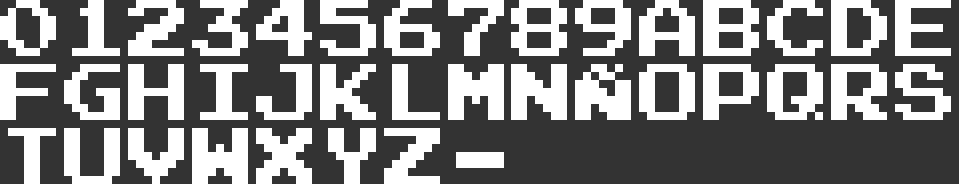
<style>
.page{position:relative;width:959px;height:184px;background:#333333}
.page>*{position:absolute;margin:0}
.t1{font:63.9px/63.9px "SuperMarioBros.NES";color:#ffffff}
</style>
<div class="page">
<p class="t1" style="left:0px;top:0px;width:951px;height:184px">0123456789abcdefghijklmnñopqrstuvwxyz-</p>
</div>
